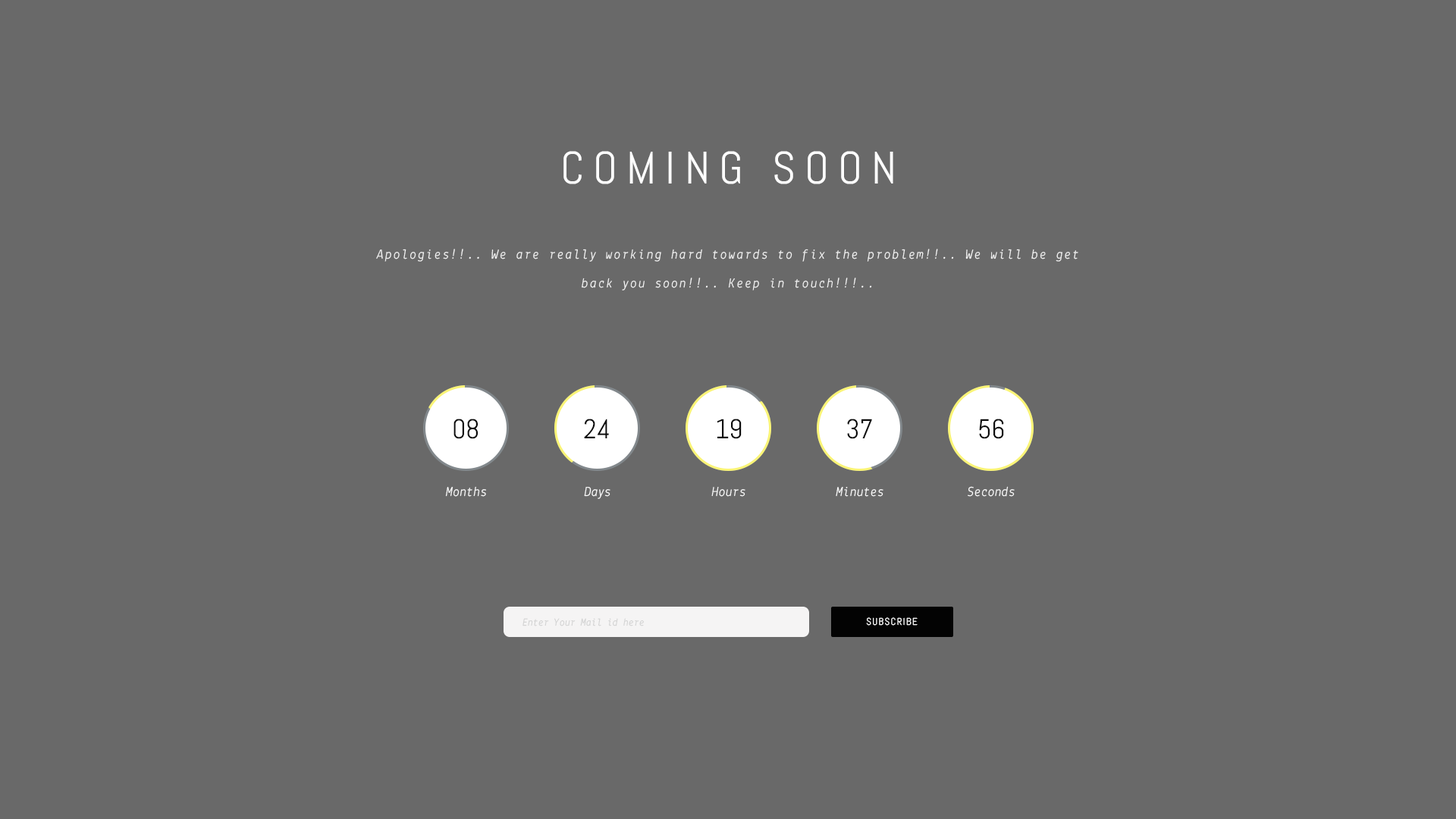
<style>
.page{position:relative;width:1456px;height:819px;background:#696969}
.page>*{position:absolute;margin:0}
.t1{font:45.5px "Abel-Regular";letter-spacing:0.2em;color:#ffffff;text-transform:uppercase}
.t2{font:13.6px/28.8px "Lekton-Italic";letter-spacing:0.1em;color:#f8f8f8}
.t3{font:27.3px "Abel-Regular";color:#0b0b0b}
.t4{font:13.6px "Lekton-Italic";color:#ffffff}
.t5{font:9.9px "Abel-Regular";letter-spacing:0.1em;color:#ffffff;text-transform:uppercase}
.t6{font:10.6px "Lekton-Italic";color:#d2d2d2}
</style>
<div class="page">
<p class="t1" style="left:563px;top:151px;width:330px;height:33px">Coming Soon</p>
<p class="t2" style="left:376px;top:249px;width:702px;height:41px;text-align:center">Apologies!!.. We are really working hard towards to fix the problem!!.. We will be get<br>back you soon!!.. Keep in touch!!!..</p>
<p class="t3" style="left:453px;top:419px;width:25px;height:20px">08</p>
<p class="t3" style="left:584px;top:419px;width:25px;height:19px">24</p>
<p class="t3" style="left:717px;top:419px;width:25px;height:20px">19</p>
<p class="t3" style="left:847px;top:419px;width:25px;height:20px">37</p>
<p class="t3" style="left:979px;top:419px;width:25px;height:20px">56</p>
<p class="t4" style="left:445px;top:486px;width:41px;height:11px">Months</p>
<p class="t4" style="left:584px;top:487px;width:26px;height:12px">Days</p>
<p class="t4" style="left:711px;top:487px;width:34px;height:10px">Hours</p>
<p class="t4" style="left:836px;top:487px;width:47px;height:10px">Minutes</p>
<p class="t4" style="left:968px;top:486px;width:47px;height:11px">Seconds</p>
<p class="t5" style="left:866px;top:617px;width:52px;height:9px">Subscribe</p>
<p class="t6" style="left:522px;top:618px;width:122px;height:8px">Enter Your Mail id here</p>
</div>
